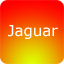
<style>
.page{position:relative;width:64px;height:64px}
.page>*{position:absolute;margin:0}
.t1{font:14.9px "Verdana";color:#ffffff}
</style>
<div class="page">
<p class="t1" style="left:8px;top:25px;width:50px;height:14px">Jaguar</p>
</div>
